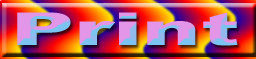
<style>
.page{position:relative;width:256px;height:59px}
.page>*{position:absolute;margin:0}
.t1{font:45.6px "Arial-Black";scale:1.92 1}
</style>
<div class="page">
<p class="t1" style="left:17px;top:12px;width:221px;height:34px">Print</p>
</div>
